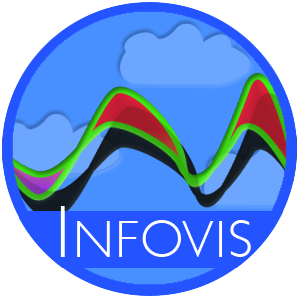
<style>
.page{position:relative;width:300px;height:300px;background:#ffffff}
.page>*{position:absolute;margin:0}
.t1{font:75px "GillSans-Light";letter-spacing:0.03em;color:#ffffff;font-variant:small-caps}
</style>
<div class="page">
<p class="t1" style="left:60px;top:206px;width:191px;height:51px">Infovis</p>
</div>
